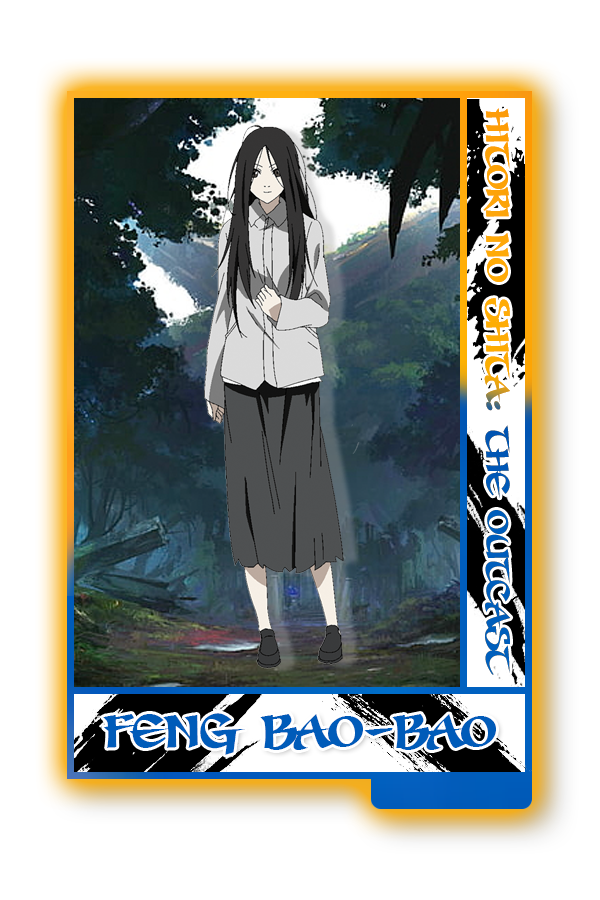
<style>
.page{position:relative;width:600px;height:900px;background:#ffffff}
.page>*{position:absolute;margin:0}
.t1{font:36.7px "SevenSwordsmenBB"}
.t2{font:53.7px "SevenSwordsmenBB";color:#005bb9}
</style>
<div class="page">
<p class="t1" style="left:483px;top:108px;width:28px;height:567px;rotate:90deg">HITORI NO SHITA: THE OUTCAST</p>
<p class="t2" style="left:103px;top:713px;width:393px;height:42px">Feng Bao-Bao</p>
</div>
